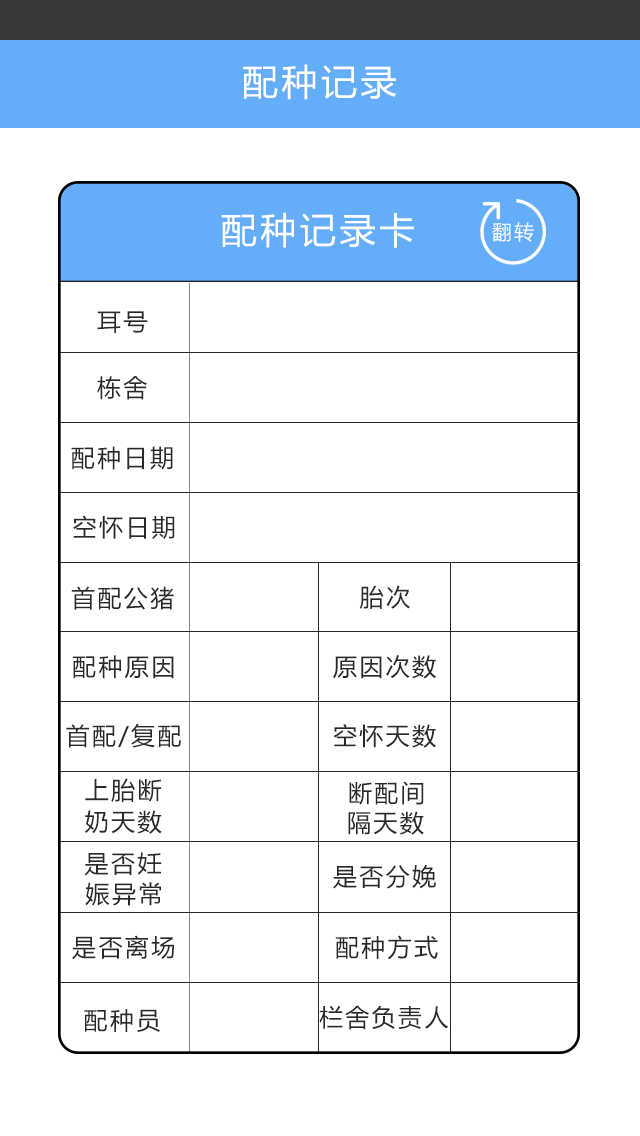
<style>
.page{position:relative;width:640px;height:1136px;background:#ffffff}
.page>*{position:absolute;margin:0}
.t1{font:36px "MicrosoftYaHei";letter-spacing:0.1em;color:#ffffff}
.t2{font:20px "MicrosoftYaHei";letter-spacing:0.1em;color:#ffffff}
.t3{font:24px "MicrosoftYaHei";letter-spacing:0.1em;color:#292929}
</style>
<div class="page">
<p class="t1" style="left:243px;top:64px;width:154px;height:36px">配种记录</p>
<p class="t1" style="left:221px;top:212px;width:193px;height:36px">配种记录卡</p>
<p class="t2" style="left:492px;top:222px;width:42px;height:20px">翻转</p>
<p class="t3" style="left:97px;top:311px;width:51px;height:22px">耳号</p>
<p class="t3" style="left:97px;top:376px;width:50px;height:24px">栋舍</p>
<p class="t3" style="left:71px;top:446px;width:102px;height:24px">配种日期</p>
<p class="t3" style="left:73px;top:515px;width:102px;height:24px">空怀日期</p>
<p class="t3" style="left:71px;top:586px;width:103px;height:24px">首配公猪</p>
<p class="t3" style="left:359px;top:585px;width:51px;height:24px">胎次</p>
<p class="t3" style="left:72px;top:655px;width:102px;height:24px">配种原因</p>
<p class="t3" style="left:333px;top:655px;width:103px;height:24px">原因次数</p>
<p class="t3" style="left:66px;top:724px;width:115px;height:24px">首配/复配</p>
<p class="t3" style="left:333px;top:724px;width:103px;height:24px">空怀天数</p>
<p class="t3" style="left:85px;top:778px;width:77px;height:24px">上胎断</p>
<p class="t3" style="left:349px;top:781px;width:75px;height:24px">断配间</p>
<p class="t3" style="left:85px;top:810px;width:77px;height:24px">奶天数</p>
<p class="t3" style="left:348px;top:811px;width:76px;height:24px">隔天数</p>
<p class="t3" style="left:84px;top:852px;width:78px;height:24px">是否妊</p>
<p class="t3" style="left:333px;top:864px;width:103px;height:25px">是否分娩</p>
<p class="t3" style="left:85px;top:882px;width:76px;height:24px">娠异常</p>
<p class="t3" style="left:72px;top:935px;width:102px;height:25px">是否离场</p>
<p class="t3" style="left:335px;top:935px;width:103px;height:25px">配种方式</p>
<p class="t3" style="left:84px;top:1009px;width:76px;height:23px">配种员</p>
<p class="t3" style="left:319px;top:1005px;width:130px;height:25px">栏舍负责人</p>
</div>
